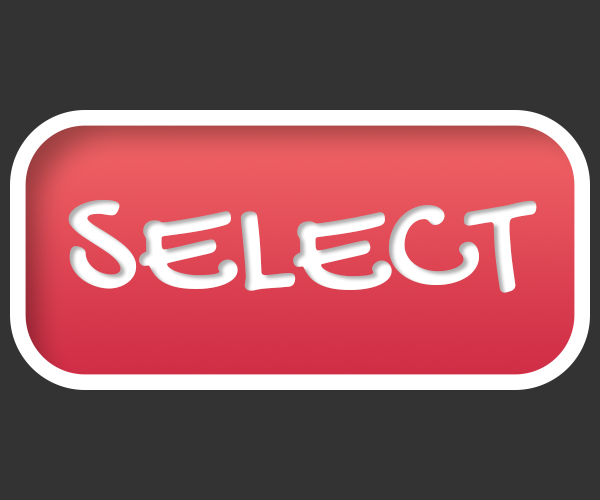
<style>
.page{position:relative;width:600px;height:500px;background:#333333}
.page>*{position:absolute;margin:0}
.t1{font:155.1px "GochiHand-Regular";color:#ffffff}
</style>
<div class="page">
<p class="t1" style="left:68px;top:199px;width:469px;height:94px">SELECT</p>
</div>
